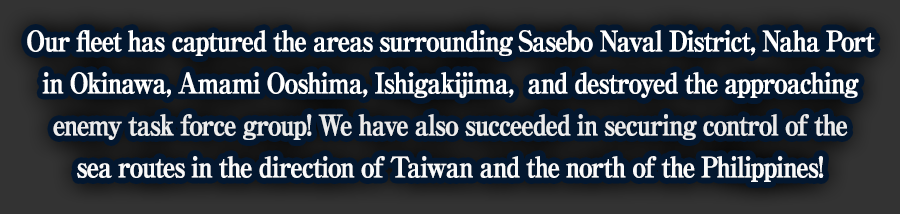
<style>
.page{position:relative;width:900px;height:214px;background:#03172f}
.page>*{position:absolute;margin:0}
.t1{font:28px/42px "RyuminPro-ExBold";letter-spacing:-0.08em;color:#ffffff;font-weight:bold;scale:0.9 1}
</style>
<div class="page">
<p class="t1" style="left:27px;top:30px;width:848px;height:152px;text-align:center">Our fleet has captured the areas surrounding Sasebo Naval District, Naha Port<br>in Okinawa, Amami Ooshima, Ishigakijima,  and destroyed the approaching<br>enemy task force group! We have also succeeded in securing control of the<br>sea routes in the direction of Taiwan and the north of the Philippines!</p>
</div>
